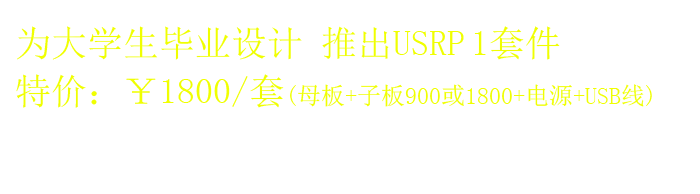
<style>
.page{position:relative;width:700px;height:194px;background:#ffffff}
.page>*{position:absolute;margin:0}
.t1{font:36px/48px "SimSun";color:#f0ff00}
.t2{font:24px/48px "SimSun";color:#f0ff00}
</style>
<div class="page">
<p class="t1" style="left:16px;top:26px;width:636px;height:82px">为大学生毕业设计 推出USRP 1套件<br>特价：￥1800/套<span class="t2">(母板+子板900或1800+电源+USB线)</span></p>
</div>
